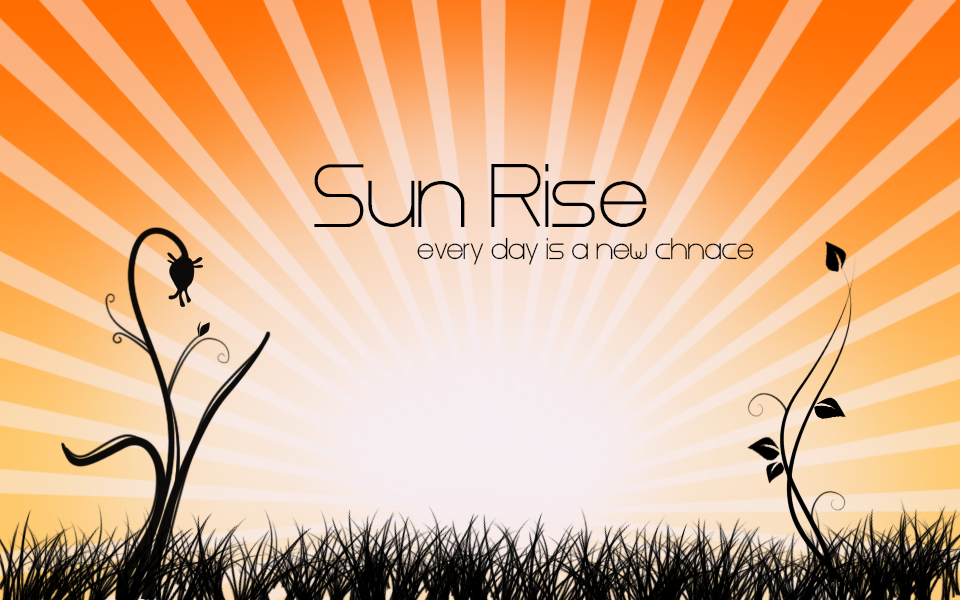
<style>
.page{position:relative;width:960px;height:600px}
.page>*{position:absolute;margin:0}
.t1{font:75px "Steiner";color:#000000}
.t2{font:25px "Steiner";color:#000000}
</style>
<div class="page">
<p class="t1" style="left:314px;top:164px;width:333px;height:63px">Sun Rise</p>
<p class="t2" style="left:417px;top:237px;width:337px;height:28px">every day is a new chnace</p>
</div>
